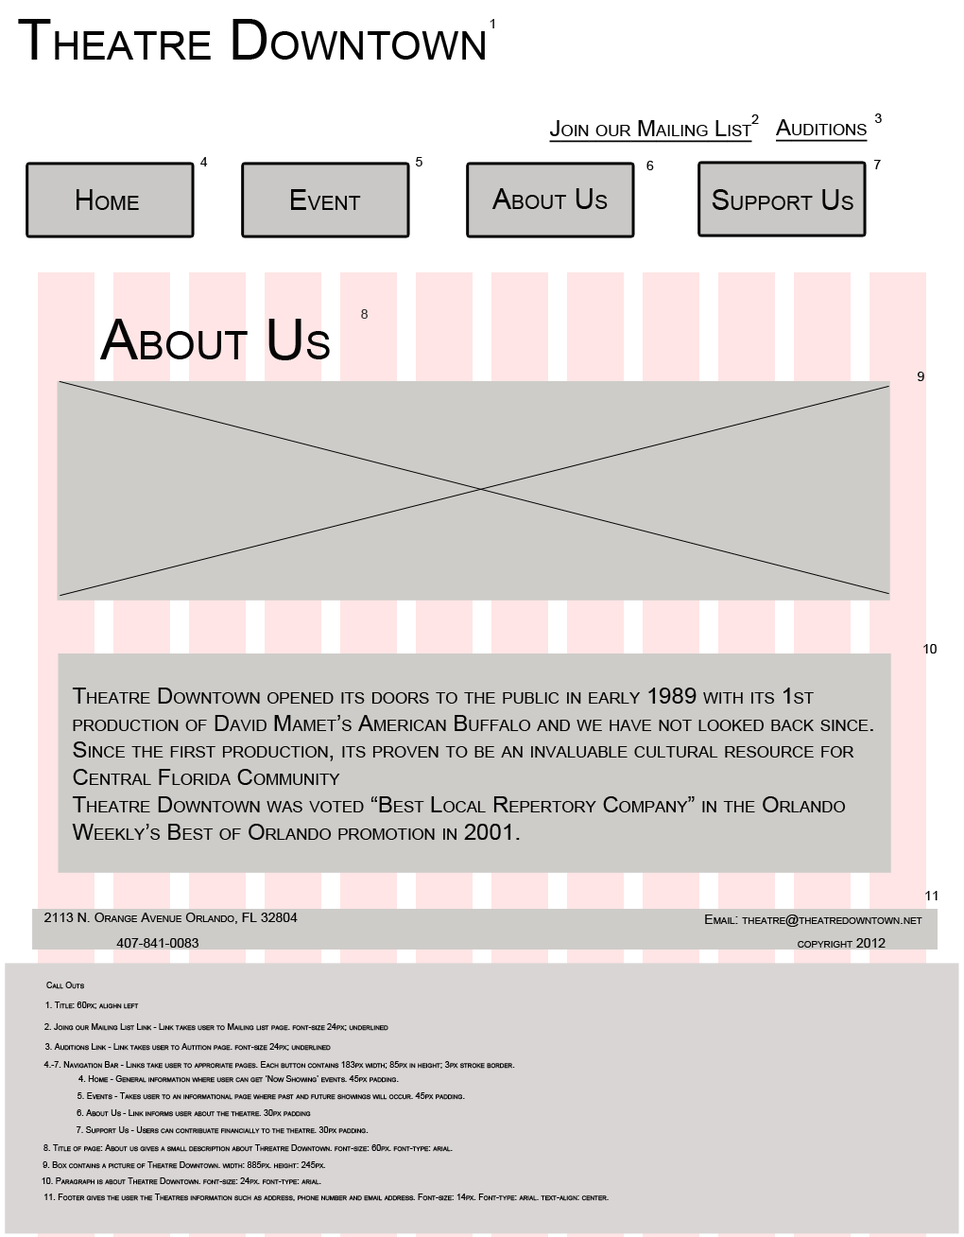
<style>
.page{position:relative;width:964px;height:1237px;background:#cdccc9}
.page>*{position:absolute;margin:0}
.t1{font:56.7px "ArialMT";color:#030303;font-variant:small-caps}
.t2{font:13.2px "ArialMT";color:#050505;font-variant:small-caps}
.t3{font:22.7px "ArialMT";color:#050505;font-variant:small-caps;text-decoration:underline}
.t4{font:28.4px "ArialMT";color:#050505;font-variant:small-caps}
.t5{font:13.2px "ArialMT";color:#373232;font-variant:small-caps}
.t6{font:56.7px "ArialMT";color:#050505;font-variant:small-caps}
.t7{font:22.7px "ArialMT";color:#050505;font-variant:small-caps}
.t8{font:8.5px "ArialMT";color:#050505;font-variant:small-caps}
</style>
<div class="page">
<p class="t1" style="left:18px;top:19px;width:467px;height:41px">Theatre Downtown</p>
<p class="t2" style="left:490px;top:19px;width:4px;height:9px">1</p>
<p class="t2" style="left:875px;top:113px;width:7px;height:10px">3</p>
<p class="t3" style="left:549px;top:120px;width:204px;height:23px">Join our Mailing List</p>
<p class="t2" style="left:752px;top:114px;width:7px;height:10px">2</p>
<p class="t3" style="left:776px;top:119px;width:92px;height:23px">Auditions</p>
<p class="t2" style="left:200px;top:157px;width:8px;height:9px">4</p>
<p class="t2" style="left:416px;top:157px;width:7px;height:9px">5</p>
<p class="t2" style="left:647px;top:161px;width:7px;height:9px">6</p>
<p class="t2" style="left:874px;top:160px;width:7px;height:9px">7</p>
<p class="t4" style="left:77px;top:189px;width:62px;height:21px">Home</p>
<p class="t4" style="left:291px;top:189px;width:70px;height:21px">Event</p>
<p class="t4" style="left:492px;top:188px;width:116px;height:21px">About Us</p>
<p class="t4" style="left:712px;top:189px;width:142px;height:21px">Support Us</p>
<p class="t5" style="left:361px;top:309px;width:7px;height:10px">8</p>
<p class="t6" style="left:99px;top:319px;width:231px;height:41px">About Us</p>
<p class="t2" style="left:918px;top:372px;width:7px;height:9px">9</p>
<p class="t2" style="left:924px;top:644px;width:13px;height:9px">10</p>
<p class="t7" style="left:72px;top:687px;width:802px;height:153px">Theatre Downtown opened its doors to the public in early 1989 with its 1st <br>production of David Mamet’s American Buffalo and we have not looked back since. <br>Since the first production, its proven to be an invaluable cultural resource for <br>Central Florida Community<br>Theatre Downtown was voted “Best Local Repertory Company” in the Orlando <br>Weekly’s Best of Orlando promotion in 2001.</p>
<p class="t2" style="left:926px;top:891px;width:12px;height:9px">11</p>
<p class="t2" style="left:44px;top:912px;width:254px;height:12px">2113 N. Orange Avenue Orlando, FL 32804</p>
<p class="t2" style="left:705px;top:914px;width:218px;height:12px">Email: theatre@theatredowntown.net</p>
<p class="t2" style="left:116px;top:938px;width:83px;height:9px">407-841-0083</p>
<p class="t2" style="left:798px;top:938px;width:88px;height:9px">copyright 2012</p>
<p class="t8" style="left:46px;top:981px;width:38px;height:8px">Call Outs</p>
<p class="t8" style="left:45px;top:1001px;width:94px;height:8px">1. Title: 60px; alighn left</p>
<p class="t8" style="left:44px;top:1023px;width:345px;height:7px">2. Joing our Mailing List Link - Link takes user to Mailing list page. font-size 24px; underlined</p>
<p class="t8" style="left:45px;top:1043px;width:286px;height:7px">3. Auditions Link - Link takes user to Autition page. font-size 24px; underlined</p>
<p class="t8" style="left:43px;top:1061px;width:472px;height:7px">4.-7. Navigation Bar - Links take user to approriate pages. Each button contains 183px width; 85px in height; 3px stroke border.</p>
<p class="t8" style="left:78px;top:1075px;width:321px;height:7px">4. Home - General information where user can get ‘Now Showing’ events. 45px padding.</p>
<p class="t8" style="left:78px;top:1092px;width:387px;height:7px">5. Events - Takes user to an informational page where past and future showings will occur. 45px padding.</p>
<p class="t8" style="left:77px;top:1109px;width:234px;height:8px">6. About Us - Link informs user about the theatre. 30px padding</p>
<p class="t8" style="left:77px;top:1126px;width:292px;height:8px">7. Support Us - Users can contribuate financially to the theatre. 30px padding.</p>
<p class="t8" style="left:43px;top:1144px;width:410px;height:7px">8. Title of page: About us gives a small description about Threatre Downtown. font-size: 60px. font-type: arial.</p>
<p class="t8" style="left:43px;top:1161px;width:282px;height:8px">9. Box contains a picture of Theatre Downtown. width: 885px. height: 245px.</p>
<p class="t8" style="left:42px;top:1177px;width:279px;height:8px">10. Paragraph is about Theatre Downtown. font-size: 24px. font-type: arial.</p>
<p class="t8" style="left:44px;top:1193px;width:565px;height:8px">11. Footer gives the user the Theatres information such as address, phone number and email address. Font-size: 14px. Font-type: arial. text-align: center.</p>
</div>
